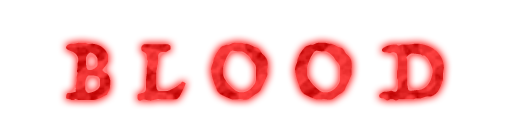
<style>
.page{position:relative;width:514px;height:122px;background:#ffffff}
.page>*{position:absolute;margin:0}
.t1{font:100px "Trattatello";letter-spacing:0.24em;color:#ea2d2d}
.t2{font:100px "ComicSansMS";letter-spacing:0.24em;color:#ea2d2d}
</style>
<div class="page">
<p class="t1" style="left:66px;top:42px;width:378px;height:59px"><span class="t2"> </span>BLOOD</p>
</div>
